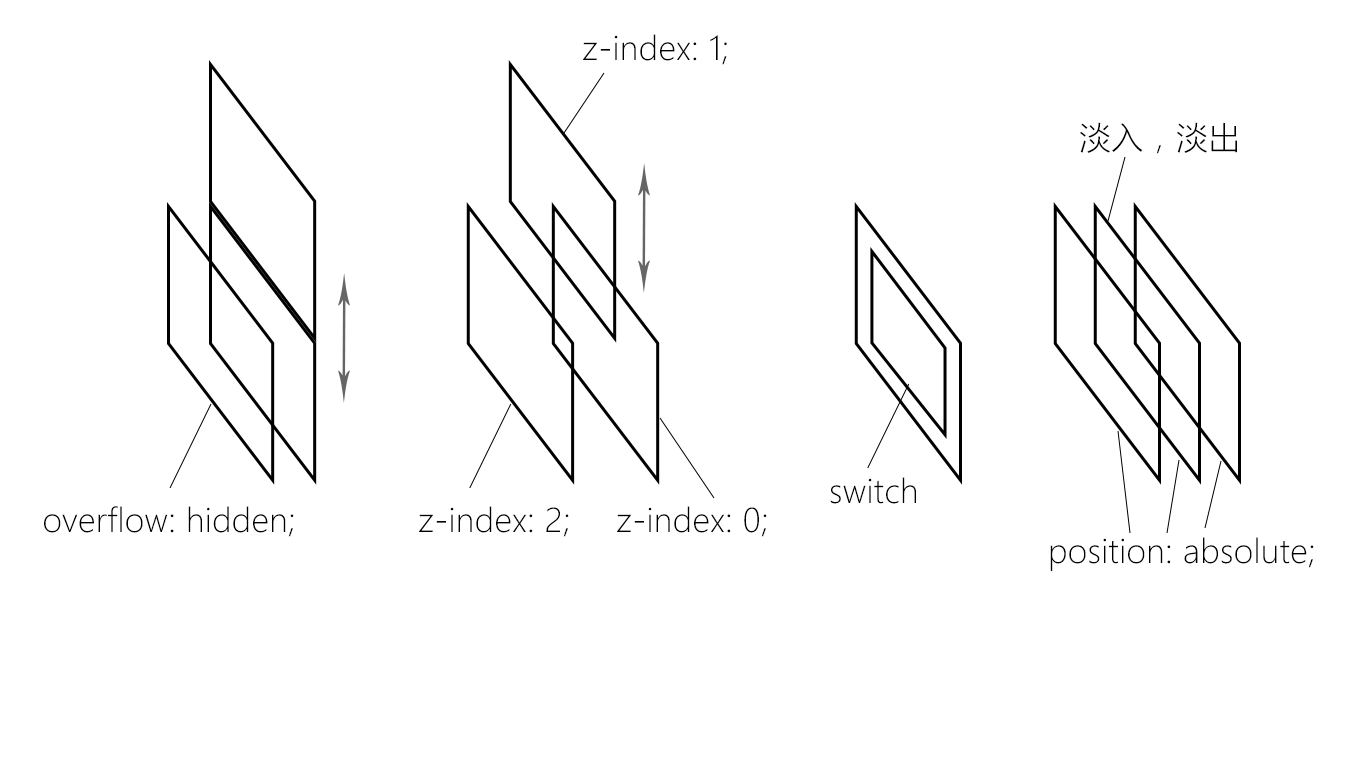
<style>
.page{position:relative;width:1366px;height:768px;background:#ffffff}
.page>*{position:absolute;margin:0}
.t1{font:32px "MicrosoftYaHeiLight";letter-spacing:0.01em;color:#000000}
</style>
<div class="page">
<p class="t1" style="left:583px;top:34px;width:144px;height:31px">z-index: 1;</p>
<p class="t1" style="left:1080px;top:122px;width:157px;height:32px">淡入，淡出</p>
<p class="t1" style="left:830px;top:477px;width:86px;height:27px">switch</p>
<p class="t1" style="left:44px;top:506px;width:250px;height:31px">overflow: hidden;</p>
<p class="t1" style="left:419px;top:506px;width:150px;height:31px">z-index: 2;</p>
<p class="t1" style="left:617px;top:506px;width:150px;height:31px">z-index: 0;</p>
<p class="t1" style="left:1050px;top:537px;width:264px;height:34px">position: absolute;</p>
</div>
